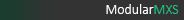
<style>
.page{position:relative;width:184px;height:20px;background:#333333}
.page>*{position:absolute;margin:0}
.t1{font:14px "Calibri-Light";color:#ffffff}
.t2{font:14px "Calibri-Light";color:#1ebf80}
</style>
<div class="page">
<p class="t1" style="left:106px;top:4px;width:73px;height:10px">Modular<span class="t2">MXS</span></p>
</div>
